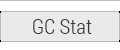
<style>
.page{position:relative;width:120px;height:50px;background:#eaeaea}
.page>*{position:absolute;margin:0}
.t1{font:21px "RobotoCondensed-Light";color:#383838}
</style>
<div class="page">
<p class="t1" style="left:33px;top:19px;width:59px;height:15px">GC Stat</p>
</div>
